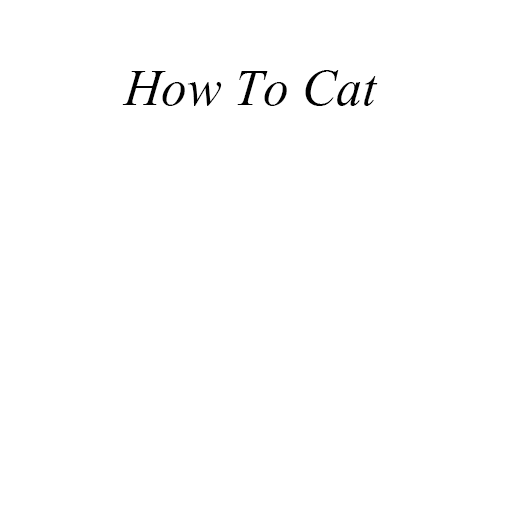
<style>
.page{position:relative;width:512px;height:512px;background:#ffffff}
.page>*{position:absolute;margin:0}
.t1{font:64px "Vijaya";color:#010101}
</style>
<div class="page">
<p class="t1" style="left:122px;top:70px;width:256px;height:36px">How To Cat</p>
</div>
